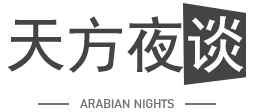
<style>
.page{position:relative;width:254px;height:112px;background:#ffffff}
.page>*{position:absolute;margin:0}
.t1{font:60px "SimHei";color:#444444}
.t2{font:60px "SimHei";color:#fefefe}
.t3{font:12px "Bahnschrift";color:#717171}
</style>
<div class="page">
<p class="t1" style="left:7px;top:16px;width:177px;height:57px">天方夜</p>
<p class="t2" style="left:188px;top:16px;width:56px;height:57px">谈</p>
<p class="t3" style="left:80px;top:99px;width:94px;height:10px">ARABIAN NIGHTS</p>
</div>
